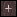
<style>
.page{position:relative;width:17px;height:17px;background:#000000}
.page>*{position:absolute;margin:0}
.t1{font:11.9px "Mason-Regular";letter-spacing:-0.1em;scale:0.95 1}
</style>
<div class="page">
<p class="t1" style="left:5px;top:5px;width:7px;height:7px">+</p>
</div>
